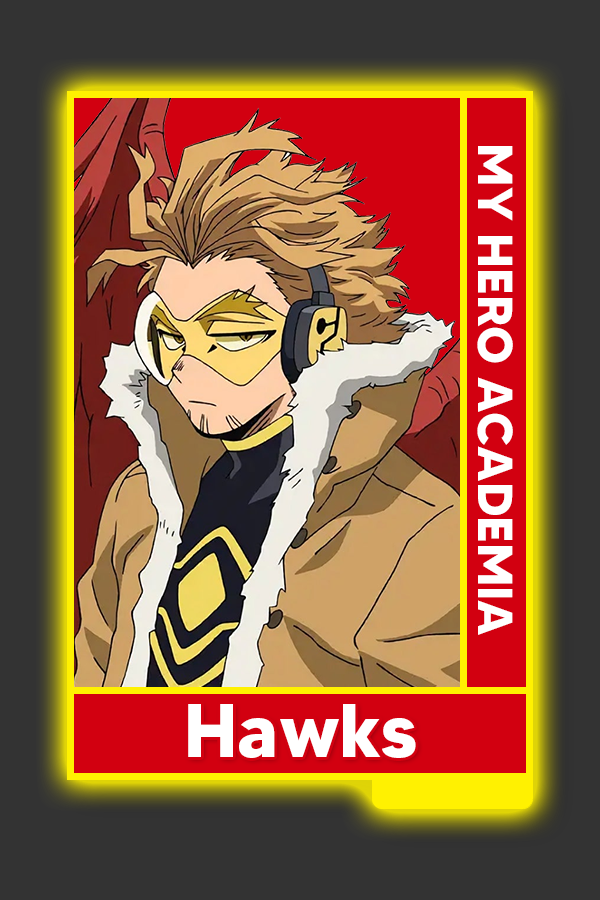
<style>
.page{position:relative;width:600px;height:900px;background:#333333}
.page>*{position:absolute;margin:0}
.t1{font:48.8px "MADETOMMY-Bold";color:#ffffff}
.t2{font:75px "MADETOMMY-Bold";color:#ffffff}
</style>
<div class="page">
<p class="t1" style="left:477px;top:146px;width:36px;height:489px;rotate:90deg">MY HERO ACADEMIA</p>
<p class="t2" style="left:188px;top:704px;width:228px;height:54px">Hawks</p>
</div>
